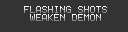
<style>
.page{position:relative;width:128px;height:32px;background:#333333}
.page>*{position:absolute;margin:0}
.t1{font:10px "Terminal"}
</style>
<div class="page">
<p class="t1" style="left:24px;top:6px;width:83px;height:7px">FLASHING SHOTS</p>
<p class="t1" style="left:30px;top:14px;width:71px;height:7px">WEAKEN DEMON</p>
</div>
